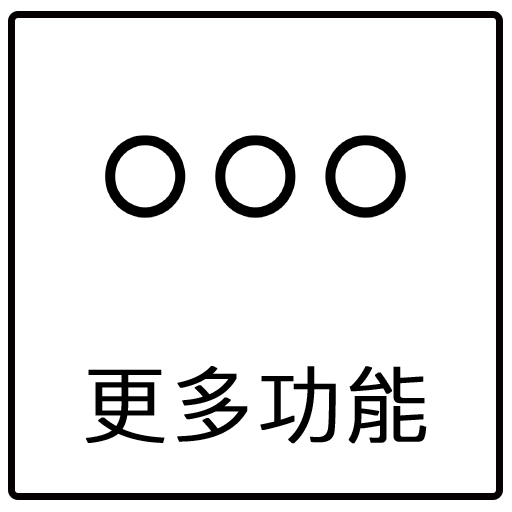
<style>
.page{position:relative;width:512px;height:512px;background:#ffffff}
.page>*{position:absolute;margin:0}
.t1{font:83.3px "PingFangTC-Light";letter-spacing:0.026em;color:#000000;font-weight:bold}
</style>
<div class="page">
<p class="t1" style="left:86px;top:366px;width:341px;height:78px">更多功能</p>
</div>
